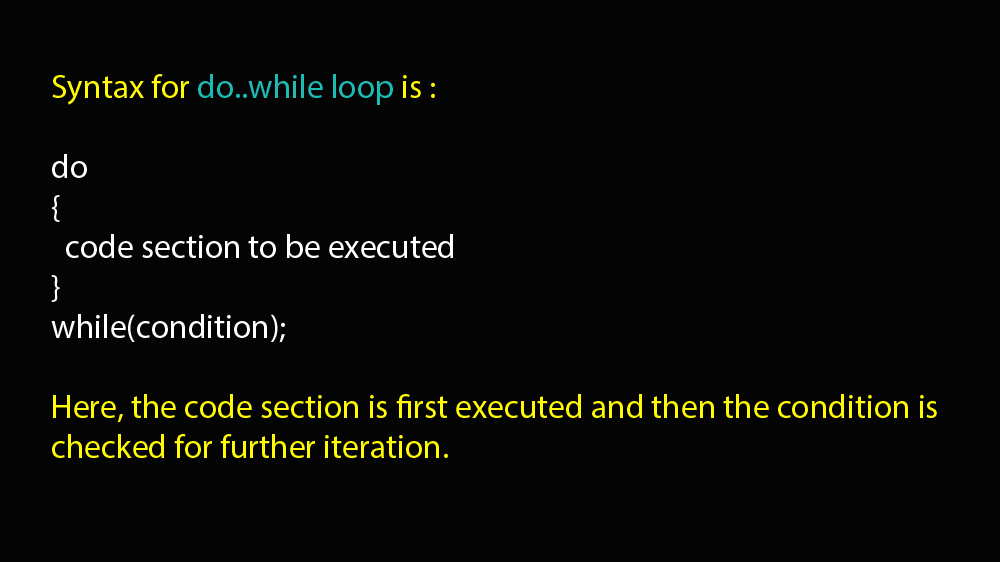
<style>
.page{position:relative;width:1000px;height:562px;background:#050404}
.page>*{position:absolute;margin:0}
.t1{font:33.3px "MyriadPro-Regular";color:#fefb04}
.t2{font:33.3px "MyriadPro-Regular";color:#1cbbb4}
.t3{font:33.3px "MyriadPro-Regular";color:#ffffff}
</style>
<div class="page">
<p class="t1" style="left:51px;top:74px;width:886px;height:384px">Syntax for <span class="t2">do..while loop</span> is :<br><br><span class="t3">do<br>{<br>  code section to be executed<br>}<br>while(condition);<br></span><br>Here, the code section is first executed and then the condition is checked for further iteration.</p>
</div>
